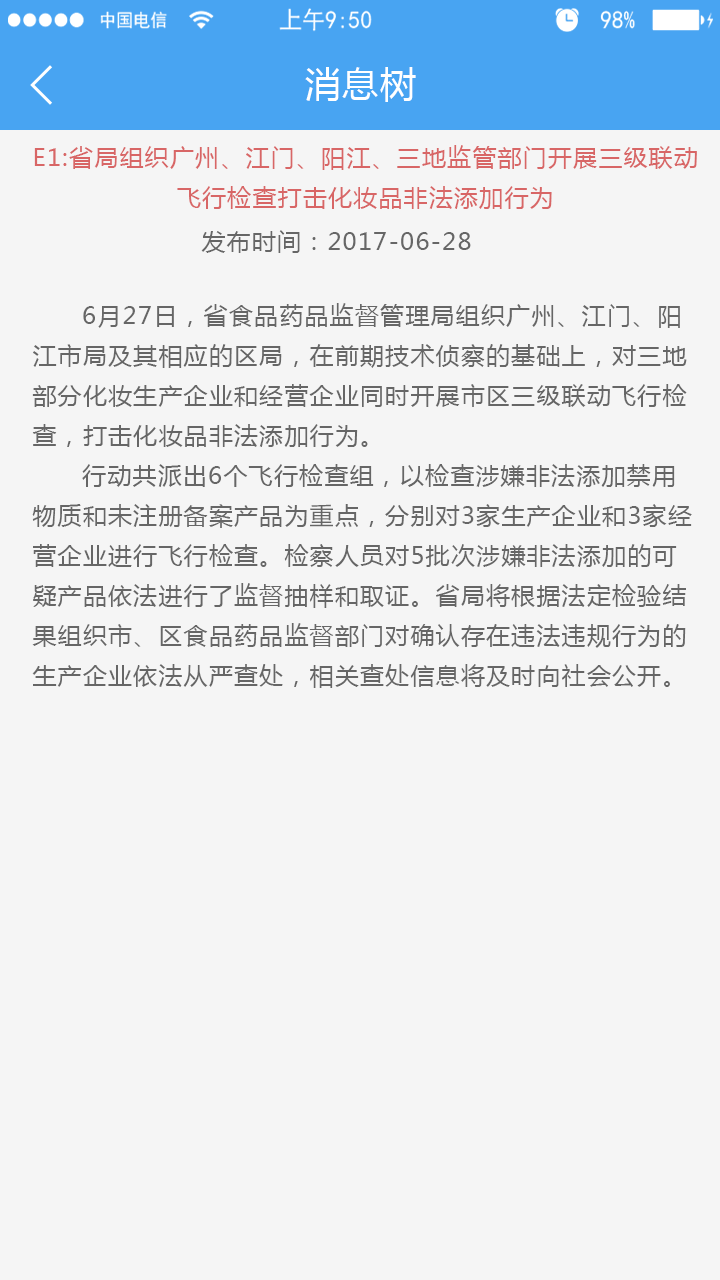
<style>
.page{position:relative;width:720px;height:1280px;background:#f5f5f5}
.page>*{position:absolute;margin:0}
.t1{font:36px "MicrosoftYaHei";letter-spacing:0.05em;color:#ffffff}
.t2{font:24px/40px "MicrosoftYaHei";letter-spacing:0.05em;color:#d86666}
.t3{font:24px "MicrosoftYaHei";letter-spacing:0.05em;color:#666666}
.t4{font:24px/40px "MicrosoftYaHei";letter-spacing:0.05em;color:#666666}
</style>
<div class="page">
<p class="t1" style="left:305px;top:67px;width:111px;height:35px">消息树</p>
<p class="t2" style="left:34px;top:145px;width:663px;height:64px;text-align:center">E1:省局组织广州、江门、阳江、三地监管部门开展三级联动飞行检查打击化妆品非法添加行为</p>
<p class="t3" style="left:201px;top:230px;width:270px;height:23px">发布时间：2017-06-28</p>
<p class="t4" style="left:32px;top:303px;width:660px;height:385px">6月27日，省食品药品监督管理局组织广州、江门、阳江市局及其相应的区局，在前期技术侦察的基础上，对三地部分化妆生产企业和经营企业同时开展市区三级联动飞行检查，打击化妆品非法添加行为。<br>      行动共派出6个飞行检查组，以检查涉嫌非法添加禁用物质和未注册备案产品为重点，分别对3家生产企业和3家经营企业进行飞行检查。检察人员对5批次涉嫌非法添加的可疑产品依法进行了监督抽样和取证。省局将根据法定检验结果组织市、区食品药品监督部门对确认存在违法违规行为的生产企业依法从严查处，相关查处信息将及时向社会公开。</p>
</div>
